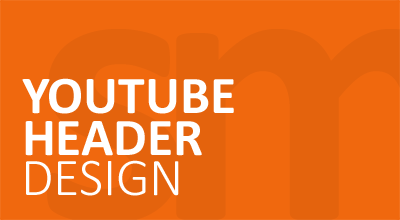
<style>
.page{position:relative;width:400px;height:220px;background:#f0680e}
.page>*{position:absolute;margin:0}
.t1{font:53.3px/41.6px "Calibri-Bold";color:#ffffff}
.t2{font:53.3px "Calibri-Light";color:#ffffff}
</style>
<div class="page">
<p class="t1" style="left:22px;top:78px;width:212px;height:78px">YOUTUBE<br>HEADER</p>
<p class="t2" style="left:26px;top:160px;width:153px;height:36px">DESIGN</p>
</div>
